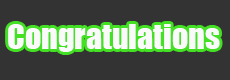
<style>
.page{position:relative;width:230px;height:80px;background:#333333}
.page>*{position:absolute;margin:0}
.t1{font:32px "Impact";color:#fbfafa}
</style>
<div class="page">
<p class="t1" style="left:8px;top:24px;width:212px;height:28px">Congratulations</p>
</div>
